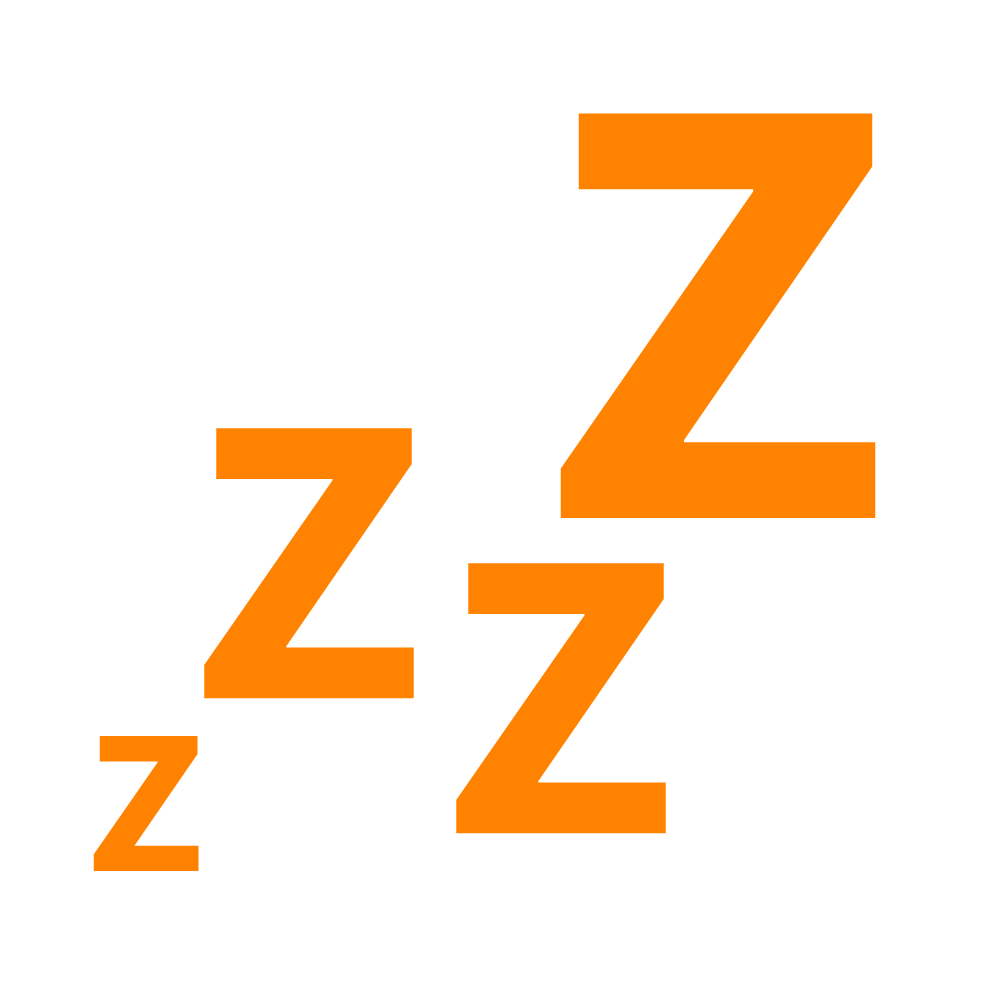
<style>
.page{position:relative;width:1000px;height:1000px;background:#ffffff}
.page>*{position:absolute;margin:0}
.t1{font:600px "MyriadPro-Bold";color:#ff8300}
.t2{font:400px "MyriadPro-Bold";color:#ff8300}
.t3{font:200px "MyriadPro-Bold";color:#ff8300}
</style>
<div class="page">
<p class="t1" style="left:560px;top:113px;width:316px;height:405px">Z</p>
<p class="t2" style="left:204px;top:428px;width:210px;height:271px">Z</p>
<p class="t2" style="left:456px;top:563px;width:210px;height:271px">Z</p>
<p class="t3" style="left:93px;top:736px;width:106px;height:135px">Z</p>
</div>
